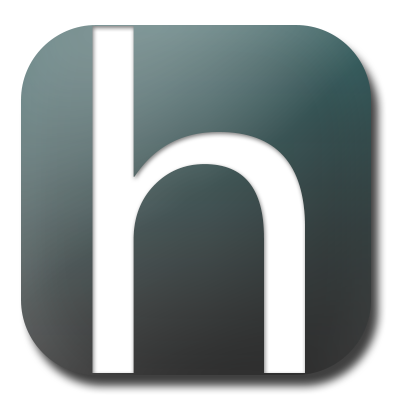
<style>
.page{position:relative;width:400px;height:400px;background:#ffffff}
.page>*{position:absolute;margin:0}
.t1{font:468.5px "NirmalaUI";color:#ffffff;scale:1.09 1}
</style>
<div class="page">
<p class="t1" style="left:92px;top:26px;width:213px;height:347px">h</p>
</div>
